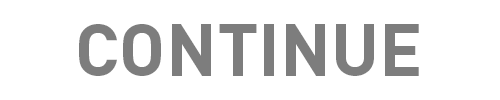
<style>
.page{position:relative;width:500px;height:100px;background:#ffffff}
.page>*{position:absolute;margin:0}
.t1{font:72px "DINPro-Bold";color:#7d7d7d}
</style>
<div class="page">
<p class="t1" style="left:79px;top:24px;width:340px;height:52px">CONTINUE</p>
</div>
